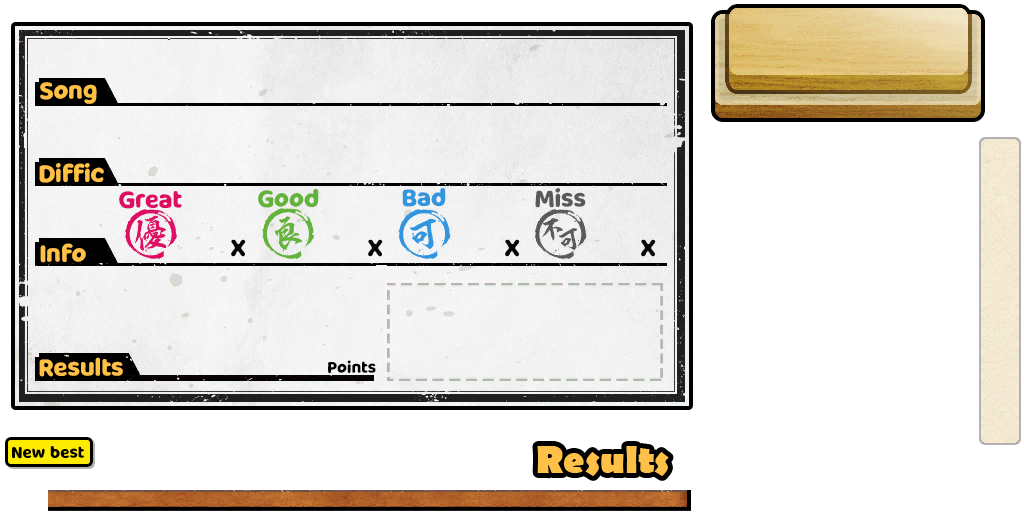
<style>
.page{position:relative;width:1024px;height:512px;background:#ffffff}
.page>*{position:absolute;margin:0}
.t1{font:24px "MilkyNiceClean";color:#ffc047}
.t2{font:24px "MilkyNiceClean";color:#de0c63}
.t3{font:24px "MilkyNiceClean";color:#63b239}
.t4{font:24px "MilkyNiceClean";color:#3196de}
.t5{font:24px "MilkyNiceClean";color:#5a595a}
.t6{font:24px "MilkyNiceClean";color:#080808}
.t7{font:16px "MilkyNiceClean";color:#000000}
</style>
<div class="page">
<p class="t1" style="left:40px;top:82px;width:57px;height:22px">Song</p>
<p class="t1" style="left:39px;top:163px;width:65px;height:20px">Diffic</p>
<p class="t2" style="left:119px;top:191px;width:63px;height:18px">Great</p>
<p class="t3" style="left:258px;top:189px;width:61px;height:19px">Good</p>
<p class="t4" style="left:402px;top:188px;width:44px;height:19px">Bad</p>
<p class="t5" style="left:535px;top:188px;width:51px;height:20px">Miss</p>
<p class="t1" style="left:40px;top:243px;width:46px;height:20px">Info</p>
<p class="t6" style="left:231px;top:239px;width:15px;height:18px">X</p>
<p class="t6" style="left:368px;top:239px;width:15px;height:18px">X</p>
<p class="t6" style="left:505px;top:239px;width:15px;height:18px">X</p>
<p class="t6" style="left:641px;top:239px;width:15px;height:18px">X</p>
<p class="t1" style="left:39px;top:357px;width:84px;height:20px">Results</p>
<p class="t7" style="left:328px;top:360px;width:48px;height:14px">Points</p>
<p class="t7" style="left:12px;top:446px;width:72px;height:13px">New best</p>
</div>
